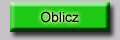
<style>
.page{position:relative;width:120px;height:40px;background:#1ec915}
.page>*{position:absolute;margin:0}
.t1{font:14px "ArialMT";color:#000000}
</style>
<div class="page">
<p class="t1" style="left:41px;top:11px;width:38px;height:12px">Oblicz</p>
</div>
